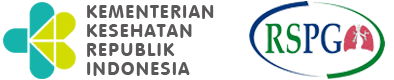
<style>
.page{position:relative;width:394px;height:80px;background:#ffffff}
.page>*{position:absolute;margin:0}
.t1{font:18px/19px "VAGRoundedBT-Regular";letter-spacing:0.075em;color:#5a5858}
</style>
<div class="page">
<p class="t1" style="left:87px;top:5px;width:127px;height:71px">KEMENTERIAN<br>KESEHATAN<br>REPUBLIK<br>INDONESIA</p>
</div>
